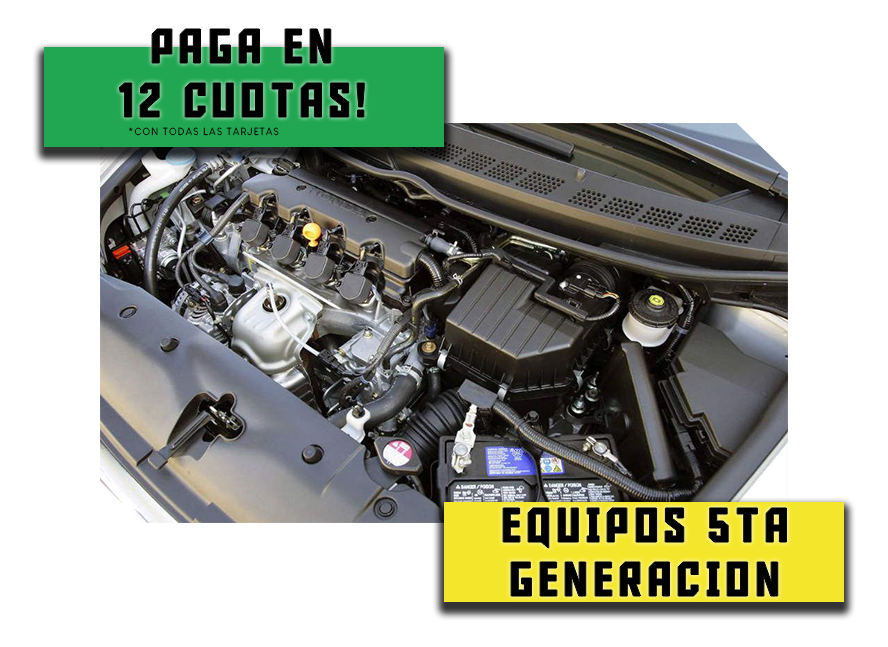
<style>
.page{position:relative;width:888px;height:647px;background:#ffffff}
.page>*{position:absolute;margin:0}
.t1{font:48px/54px "AldotheApache";letter-spacing:0.121em;color:#000000}
.t2{font:10px "LouisGeorgeCafe";letter-spacing:0.121em;color:#000000}
</style>
<div class="page">
<p class="t1" style="left:119px;top:29px;width:246px;height:88px;text-align:center">PAGA EN<br>12 CUOTAS!</p>
<p class="t2" style="left:129px;top:127px;width:150px;height:9px">*CON TODAS LAS TARJETAS</p>
<p class="t1" style="left:503px;top:508px;width:284px;height:88px;text-align:center">EQUIPOS 5ta<br>GENERACION</p>
</div>
